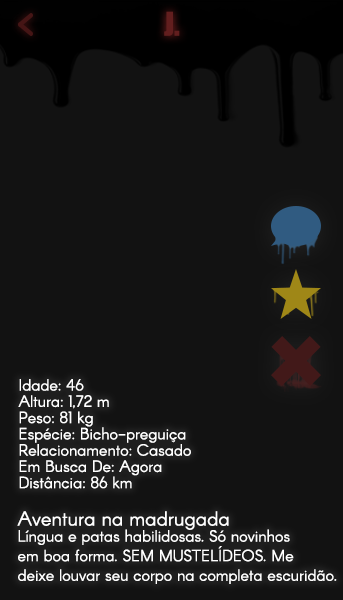
<style>
.page{position:relative;width:343px;height:600px;background:#121212}
.page>*{position:absolute;margin:0}
.t1{font:16px "Arcon-Regular";color:#ffffff}
.t2{font:16px/22.5px "Arcon-Regular";letter-spacing:0.001em;color:#ffffff}
.t3{font:20px/22.5px "Arcon-Regular";letter-spacing:0.001em;color:#ffffff}
.t4{font:16px/19px "Arcon-Regular";letter-spacing:0.001em;color:#ffffff}
</style>
<div class="page">
<p class="t1" style="left:18px;top:379px;width:173px;height:110px">Idade: 46<br>Altura: 1,72 m<br>Peso: 81 kg<br>Espécie: Bicho-preguiça<br>Relacionamento: Casado<br>Em Busca De: Agora<br>Distância: 86 km</p>
<p class="t2" style="left:17px;top:511px;width:320px;height:73px"><span class="t3">Aventura na madrugada<br></span><span class="t4">Língua e patas habilidosas. Só novinhos<br></span>em boa forma. SEM MUSTELÍDEOS. Me<br>deixe louvar seu corpo na completa escuridão.</p>
</div>
